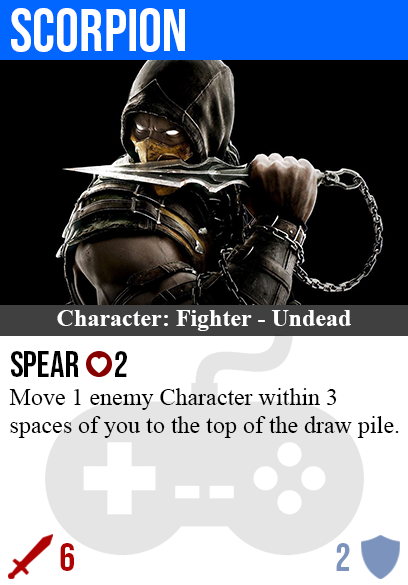
<style>
.page{position:relative;width:408px;height:585px;background:#ffffff}
.page>*{position:absolute;margin:0}
.t1{font:60px "BebasNeue-Regular";color:#ffffff}
.t2{font:24px "TimesNewRomanPS-BoldMT";color:#ffffff}
.t3{font:36px "BebasNeue-Regular";color:#000000}
.t4{font:24px "TimesNewRomanPSMT";color:#000000}
.t5{font:40px "BebasNeue-Regular";color:#af0202}
.t6{font:40px "BebasNeue-Regular";color:#7c94bd}
</style>
<div class="page">
<p class="t1" style="left:11px;top:8px;width:174px;height:44px">scorpion</p>
<p class="t2" style="left:57px;top:310px;width:294px;height:21px">Character: Fighter - Undead</p>
<p class="t3" style="left:11px;top:351px;width:116px;height:26px">spear      2</p>
<p class="t4" style="left:9px;top:388px;width:390px;height:50px">Move 1 enemy Character within 3<br>spaces of you to the top of the draw pile.</p>
<p class="t5" style="left:60px;top:543px;width:14px;height:28px">6</p>
<p class="t6" style="left:336px;top:543px;width:14px;height:28px">2</p>
</div>
